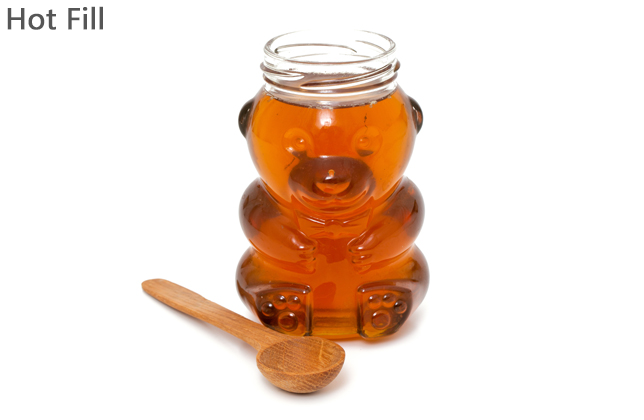
<style>
.page{position:relative;width:644px;height:420px;background:#ffffff}
.page>*{position:absolute;margin:0}
.t1{font:30px "Gadugi";color:#565656;font-weight:bold}
</style>
<div class="page">
<p class="t1" style="left:7px;top:6px;width:96px;height:24px">Hot Fill</p>
</div>
